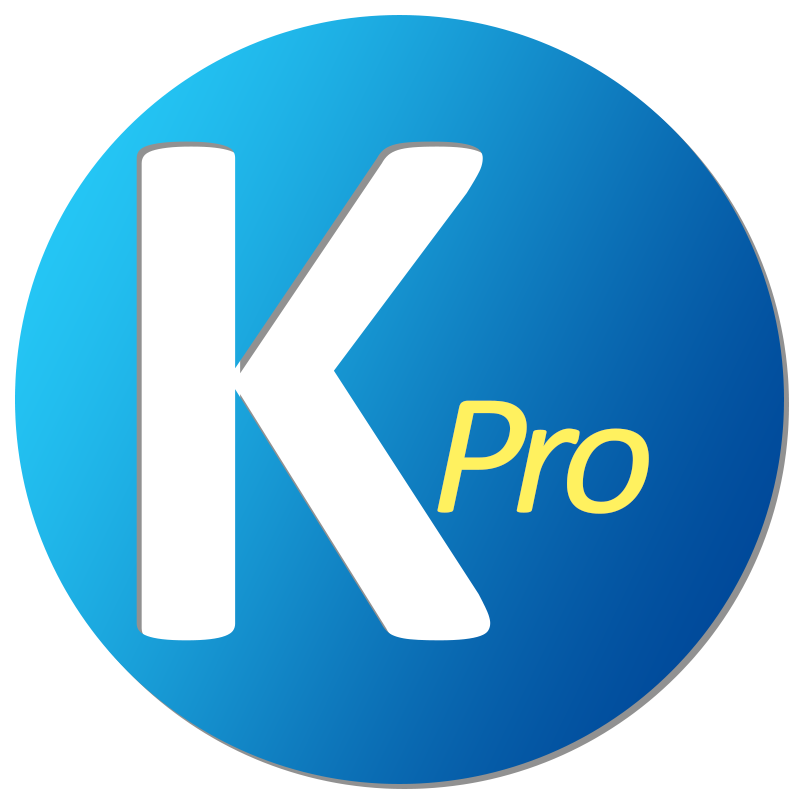
<style>
.page{position:relative;width:800px;height:800px;background:#ffffff}
.page>*{position:absolute;margin:0}
.t1{font:176.1px "Calibri-Italic";letter-spacing:-0.08em;color:#fff15f;scale:1.06 1}
</style>
<div class="page">
<p class="t1" style="left:437px;top:400px;width:212px;height:114px">Pro</p>
</div>
